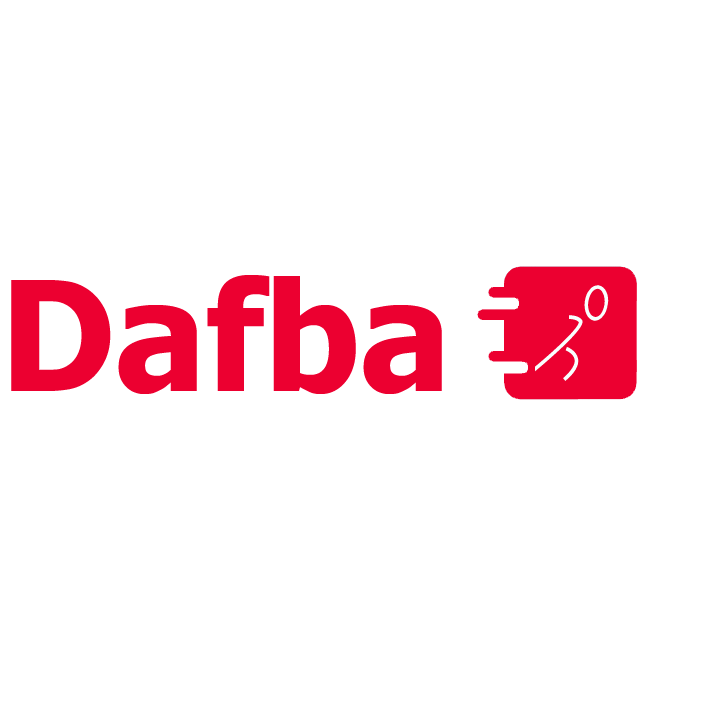
<style>
.page{position:relative;width:720px;height:720px;background:#ffffff}
.page>*{position:absolute;margin:0}
.t1{font:152px "Tahoma-Bold";color:#ec0030}
</style>
<div class="page">
<p class="t1" style="left:11px;top:275px;width:431px;height:119px">Dafba</p>
</div>
